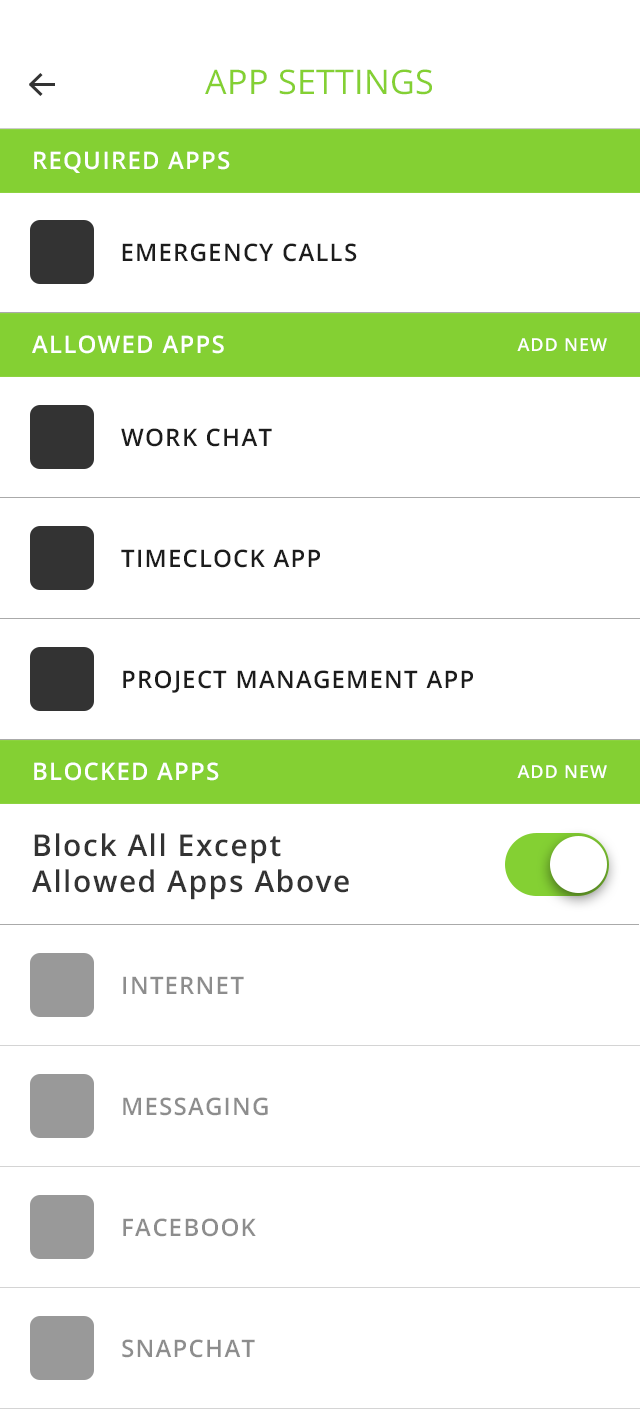
<style>
.page{position:relative;width:640px;height:1409px;background:#ffffff}
.page>*{position:absolute;margin:0}
.t1{font:34px "OpenSans";letter-spacing:0.01em;color:#84d033;text-transform:uppercase}
.t2{font:24px "OpenSans-Semibold";letter-spacing:0.05em;color:#ffffff;text-transform:uppercase}
.t3{font:24px "OpenSans-Semibold";letter-spacing:0.05em;color:#1c1c1c;text-transform:uppercase}
.t4{font:18px "OpenSans-Semibold";letter-spacing:0.05em;color:#ffffff;text-transform:uppercase}
.t5{font:30px "OpenSans-Semibold";letter-spacing:0.05em;color:#333333}
.t6{font:24px "OpenSans-Semibold";letter-spacing:0.05em;color:#8d8d8d;text-transform:uppercase}
</style>
<div class="page">
<p class="t1" style="left:205px;top:69px;width:227px;height:26px">APP SETTINGS</p>
<p class="t2" style="left:34px;top:151px;width:196px;height:22px">REQUIRED APPS</p>
<p class="t3" style="left:122px;top:243px;width:235px;height:19px">EMERGENCY CALLS</p>
<p class="t2" style="left:32px;top:335px;width:192px;height:19px">ALLOWED APPS</p>
<p class="t4" style="left:517px;top:338px;width:90px;height:13px">ADD NEW</p>
<p class="t3" style="left:121px;top:428px;width:151px;height:19px">WORK CHAT</p>
<p class="t3" style="left:121px;top:549px;width:199px;height:19px">TIMECLOCK APP</p>
<p class="t3" style="left:123px;top:670px;width:350px;height:23px">PROJECT MANAGEMENT APP</p>
<p class="t2" style="left:34px;top:762px;width:185px;height:19px">BLOCKED APPS</p>
<p class="t4" style="left:517px;top:765px;width:90px;height:13px">ADD NEW</p>
<p class="t5" style="left:32px;top:833px;width:317px;height:67px">Block All Except<br>Allowed Apps Above</p>
<p class="t6" style="left:123px;top:976px;width:121px;height:18px">INTERNET</p>
<p class="t6" style="left:123px;top:1097px;width:145px;height:19px">MESSAGING</p>
<p class="t6" style="left:123px;top:1218px;width:133px;height:19px">FACEBOOK</p>
<p class="t6" style="left:122px;top:1339px;width:133px;height:19px">SNAPCHAT</p>
</div>
